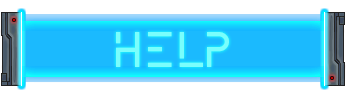
<style>
.page{position:relative;width:346px;height:95px;background:#ffffff}
.page>*{position:absolute;margin:0}
.t1{font:48px "ZELDA";color:#7afefc}
</style>
<div class="page">
<p class="t1" style="left:116px;top:32px;width:113px;height:35px">Help</p>
</div>
